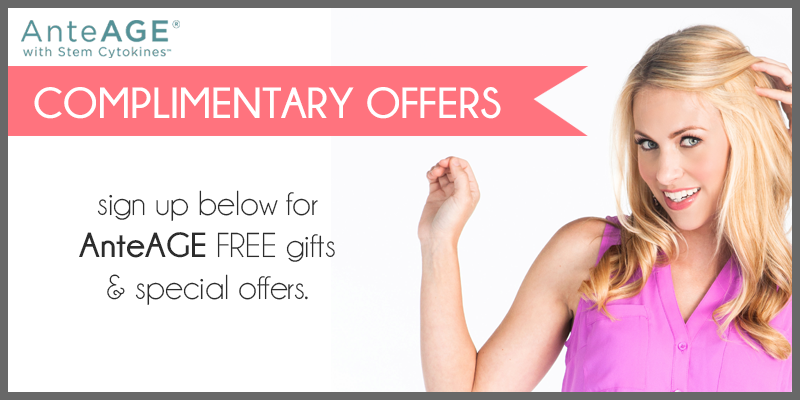
<style>
.page{position:relative;width:800px;height:400px;background:#ffffff}
.page>*{position:absolute;margin:0}
.t1{font:43.6px "Champagne&Limousines-Bold";color:#ffffff}
.t2{font:34.9px "Champagne&Limousines";color:#2c2c2c}
.t3{font:34.9px "Champagne&Limousines-Bold";color:#2c2c2c}
</style>
<div class="page">
<p class="t1" style="left:34px;top:87px;width:467px;height:32px">COMPLIMENTARY OFFERS</p>
<p class="t2" style="left:79px;top:190px;width:256px;height:115px;text-align:center">sign up below for<br><span class="t3">AnteAGE </span>FREE gifts<br>&amp; special offers.</p>
</div>
